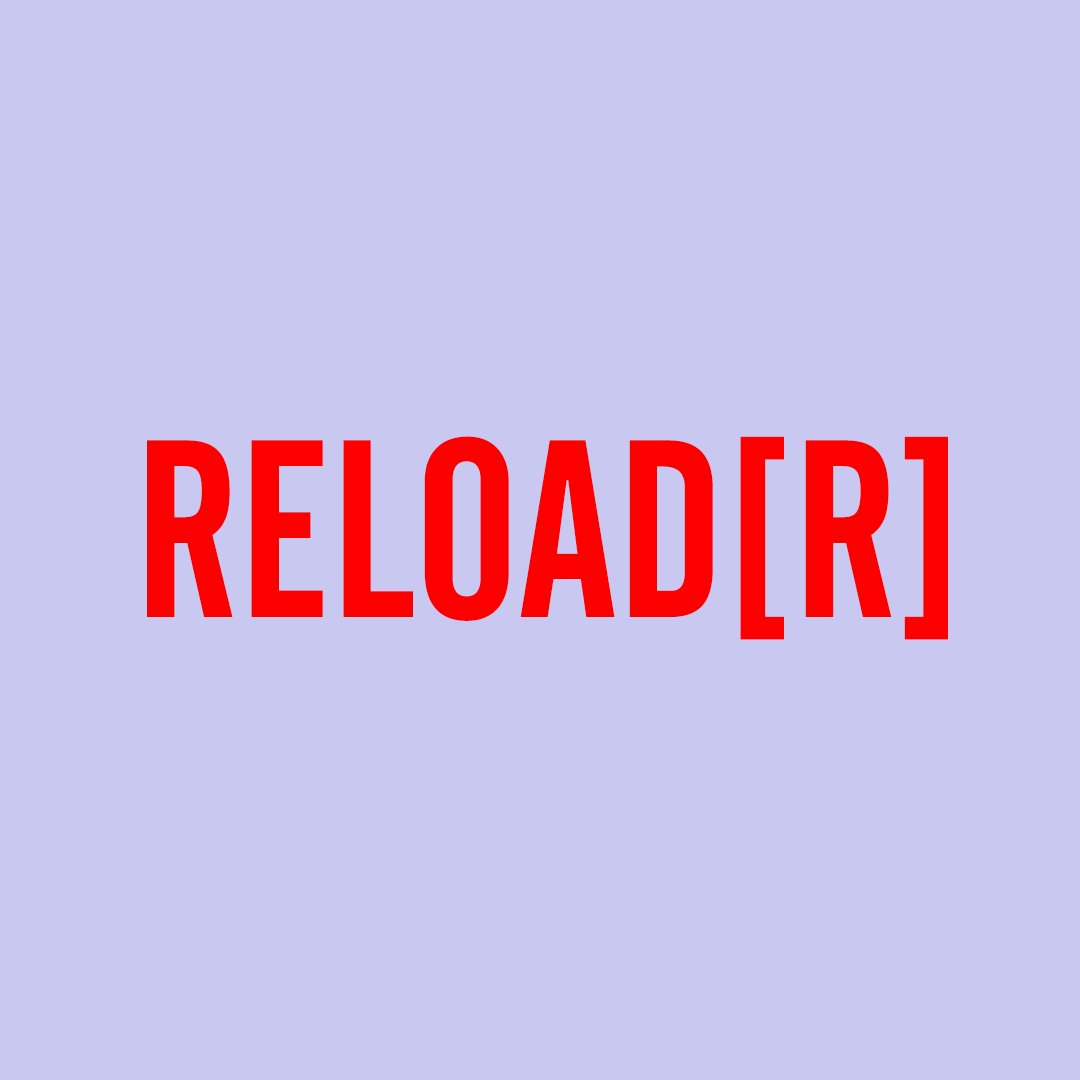
<style>
.page{position:relative;width:1080px;height:1080px;background:#c8c8f0}
.page>*{position:absolute;margin:0}
.t1{font:250px "AlternateGothicNo2BT-Regular";color:#fc0000}
</style>
<div class="page">
<p class="t1" style="left:147px;top:436px;width:801px;height:204px">RELOAD[R]</p>
</div>
